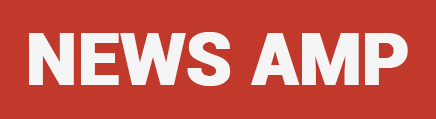
<style>
.page{position:relative;width:436px;height:119px;background:#c0392b}
.page>*{position:absolute;margin:0}
.t1{font:72px "Roboto-Black";letter-spacing:-0.01em;color:#f5f5f5;font-weight:bold}
</style>
<div class="page">
<p class="t1" style="left:29px;top:32px;width:379px;height:54px">NEWS AMP</p>
</div>
